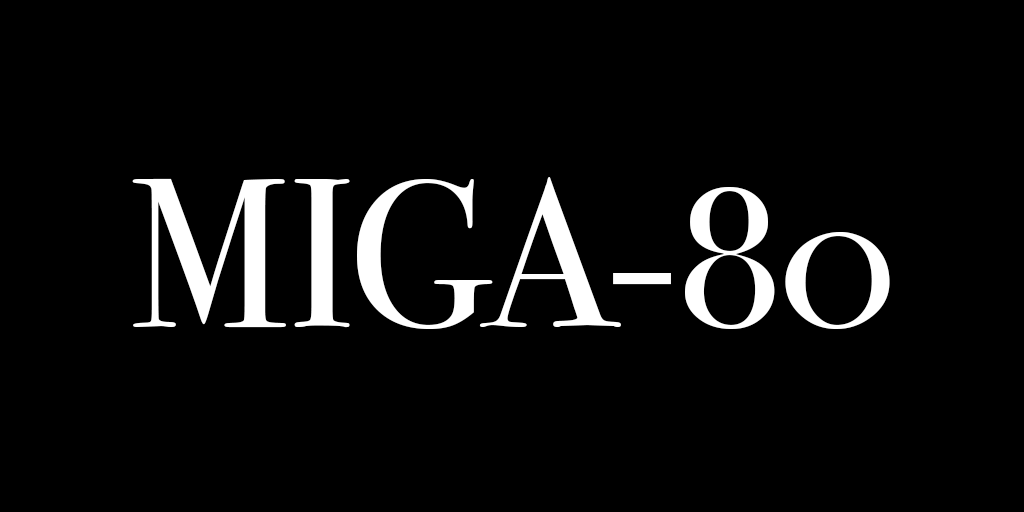
<style>
.page{position:relative;width:1024px;height:512px;background:#000000}
.page>*{position:absolute;margin:0}
.t1{font:210px "BodoniSvtyTwoSCITCTT-Book";color:#ffffff}
</style>
<div class="page">
<p class="t1" style="left:132px;top:177px;width:758px;height:152px">MIGA-80</p>
</div>
